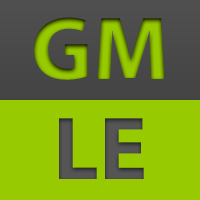
<style>
.page{position:relative;width:200px;height:200px;background:#97ca00}
.page>*{position:absolute;margin:0}
.t1{font:90px "MyriadPro-Bold";color:#97ca00}
.t2{font:90px "MyriadPro-Bold";color:#555555}
</style>
<div class="page">
<p class="t1" style="left:34px;top:17px;width:131px;height:63px">GM</p>
<p class="t2" style="left:59px;top:118px;width:85px;height:61px">LE</p>
</div>
